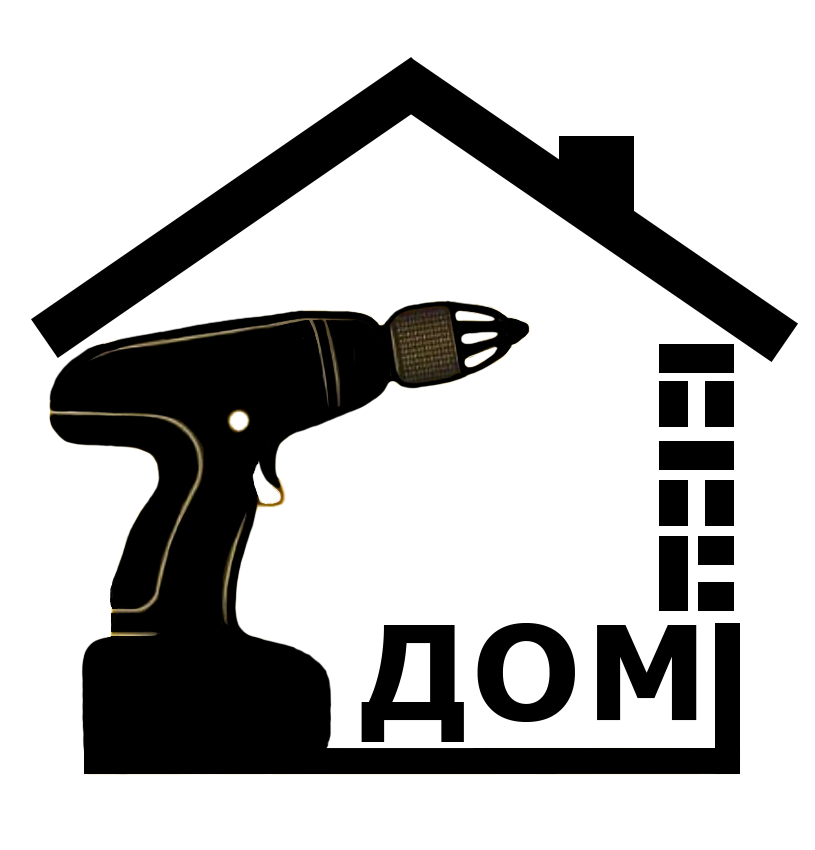
<style>
.page{position:relative;width:815px;height:850px;background:#ffffff}
.page>*{position:absolute;margin:0}
.t1{font:130px "Verdana-Bold";letter-spacing:0.025em;color:#000000}
</style>
<div class="page">
<p class="t1" style="left:361px;top:623px;width:336px;height:119px">ДОМ</p>
</div>
